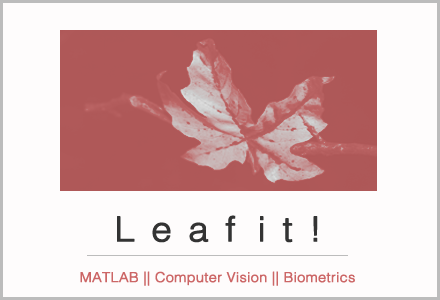
<style>
.page{position:relative;width:440px;height:300px;background:#fefcfc}
.page>*{position:absolute;margin:0}
.t1{font:34.2px "Helvetica-Light";letter-spacing:0.44em;color:#333333;font-weight:bold;scale:1.06 1}
.t2{font:13.7px "Helvetica-Light";color:#cc6666;font-weight:bold;scale:1.06 1}
</style>
<div class="page">
<p class="t1" style="left:117px;top:215px;width:201px;height:28px">Leaf it!</p>
<p class="t2" style="left:80px;top:271px;width:275px;height:15px">MATLAB || Computer Vision || Biometrics</p>
</div>
